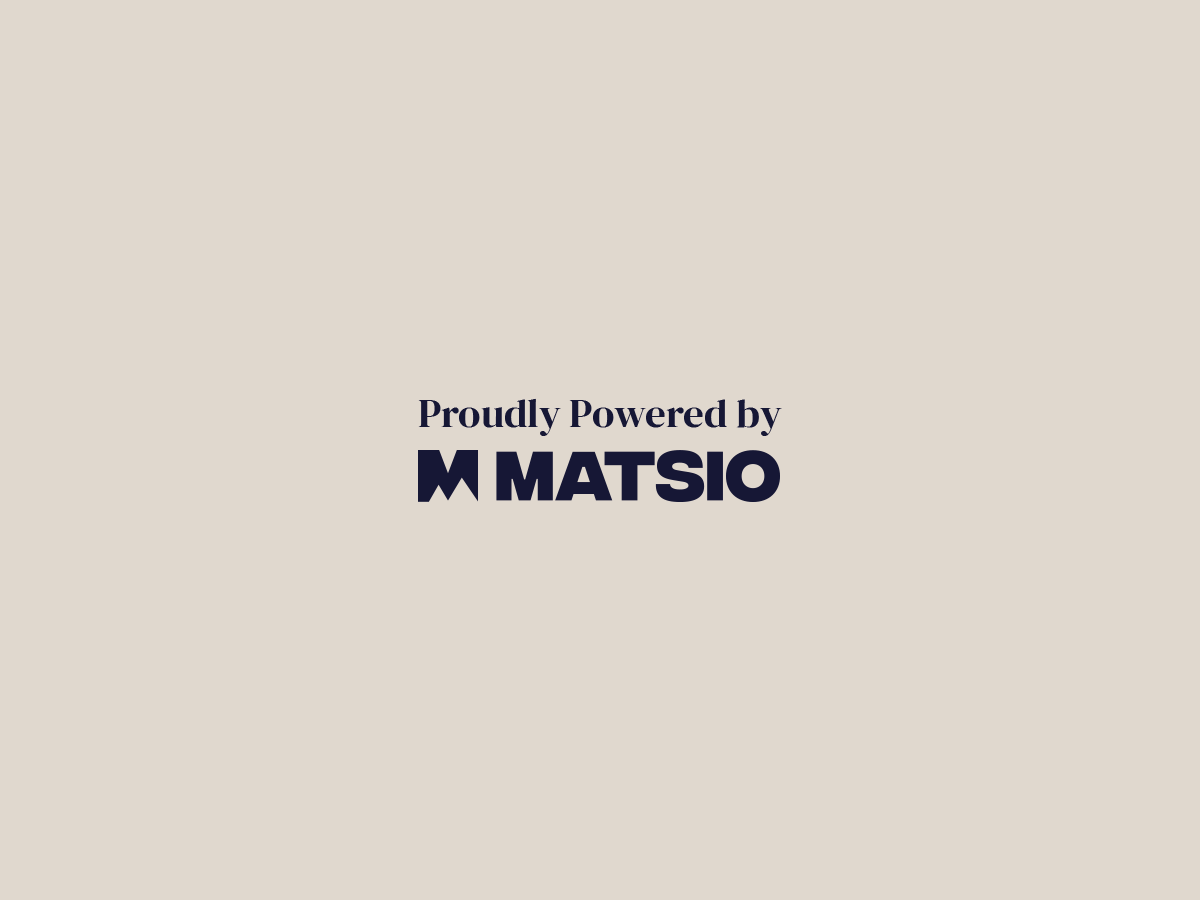
<style>
.page{position:relative;width:1200px;height:900px;background:#e0d8ce}
.page>*{position:absolute;margin:0}
.t1{font:41px "DMSerifDisplay-Regular";color:#161735}
</style>
<div class="page">
<p class="t1" style="left:418px;top:398px;width:364px;height:38px">Proudly Powered by</p>
</div>
